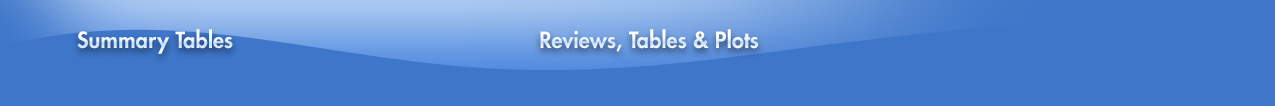
<style>
.page{position:relative;width:1275px;height:106px;background:#3e76c9}
.page>*{position:absolute;margin:0}
.t1{font:22px "Futura-Heavy"}
</style>
<div class="page">
<p class="t1" style="left:77px;top:29px;width:156px;height:25px">Summary Tables</p>
<p class="t1" style="left:540px;top:29px;width:219px;height:23px">Reviews, Tables &amp; Plots</p>
</div>
